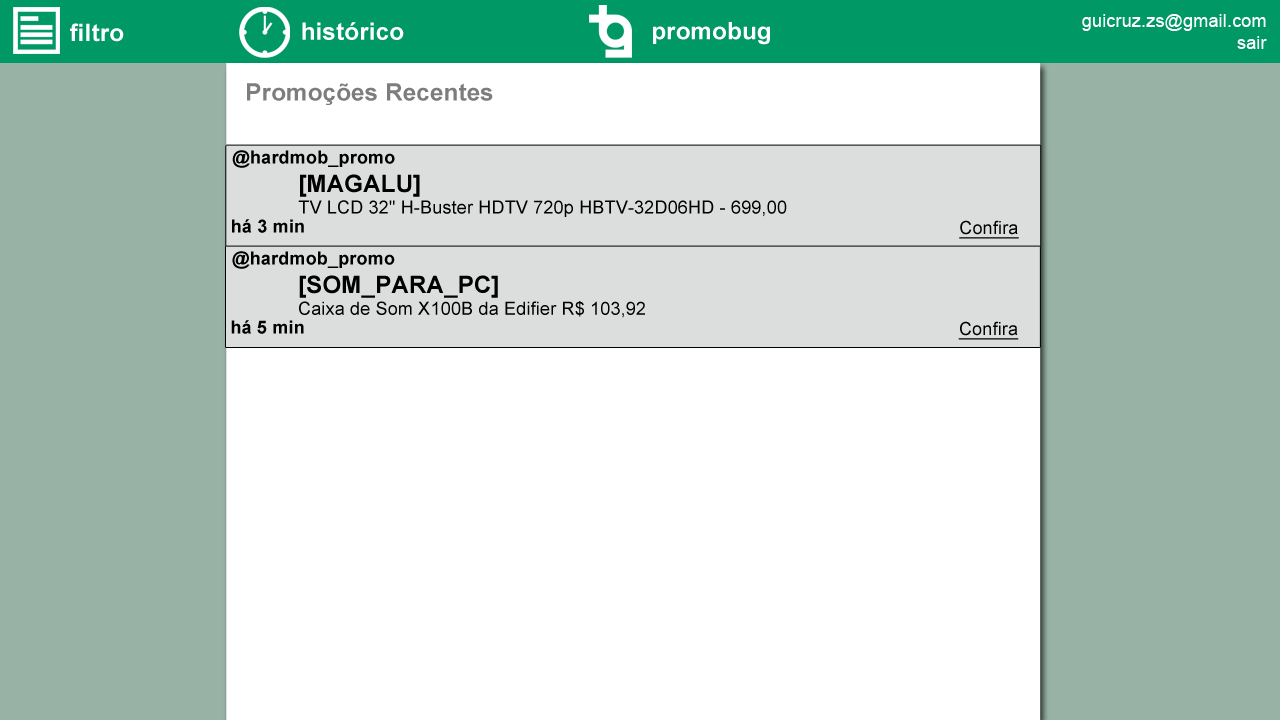
<style>
.page{position:relative;width:1280px;height:720px;background:#ffffff}
.page>*{position:absolute;margin:0}
.t1{font:18px "ArialMT";letter-spacing:0.01em;color:#ffffff}
.t2{font:24px "Arial-BoldMT";letter-spacing:0.01em;color:#ffffff}
.t3{font:24px "Arial-BoldMT";letter-spacing:0.01em;color:#7d7d7d}
.t4{font:18px "Arial-BoldMT";letter-spacing:0.01em;color:#000000}
.t5{font:18px "ArialMT";letter-spacing:0.01em;color:#010101}
.t6{font:24px "Arial-BoldMT";letter-spacing:0.01em;color:#000000}
.t7{font:18px "ArialMT";letter-spacing:0.01em;color:#010101;text-decoration:underline}
.t8{font:24px "Arial-BoldMT";letter-spacing:0.01em;color:#010101}
</style>
<div class="page">
<p class="t1" style="left:1082px;top:14px;width:185px;height:35px;text-align:right">guicruz.zs@gmail.com<br>sair</p>
<p class="t2" style="left:70px;top:23px;width:54px;height:19px">filtro</p>
<p class="t2" style="left:302px;top:22px;width:102px;height:18px">histórico</p>
<p class="t2" style="left:653px;top:22px;width:117px;height:23px">promobug</p>
<p class="t3" style="left:247px;top:83px;width:246px;height:22px">Promoções Recentes</p>
<p class="t4" style="left:232px;top:150px;width:163px;height:18px">@hardmob_promo</p>
<p class="t5" style="left:298px;top:174px;width:489px;height:43px"><span class="t6">[MAGALU]<br></span>TV LCD 32" H-Buster HDTV 720p HBTV-32D06HD - 699,00</p>
<p class="t4" style="left:232px;top:219px;width:72px;height:14px">há 3 min</p>
<p class="t7" style="left:959px;top:220px;width:60px;height:19px">Confira</p>
<p class="t4" style="left:232px;top:251px;width:163px;height:18px">@hardmob_promo</p>
<p class="t5" style="left:299px;top:275px;width:346px;height:43px"><span class="t8">[SOM_PARA_PC]<br></span>Caixa de Som X100B da Edifier R$ 103,92</p>
<p class="t4" style="left:231px;top:320px;width:73px;height:14px">há 5 min</p>
<p class="t7" style="left:958px;top:321px;width:61px;height:19px">Confira</p>
</div>
